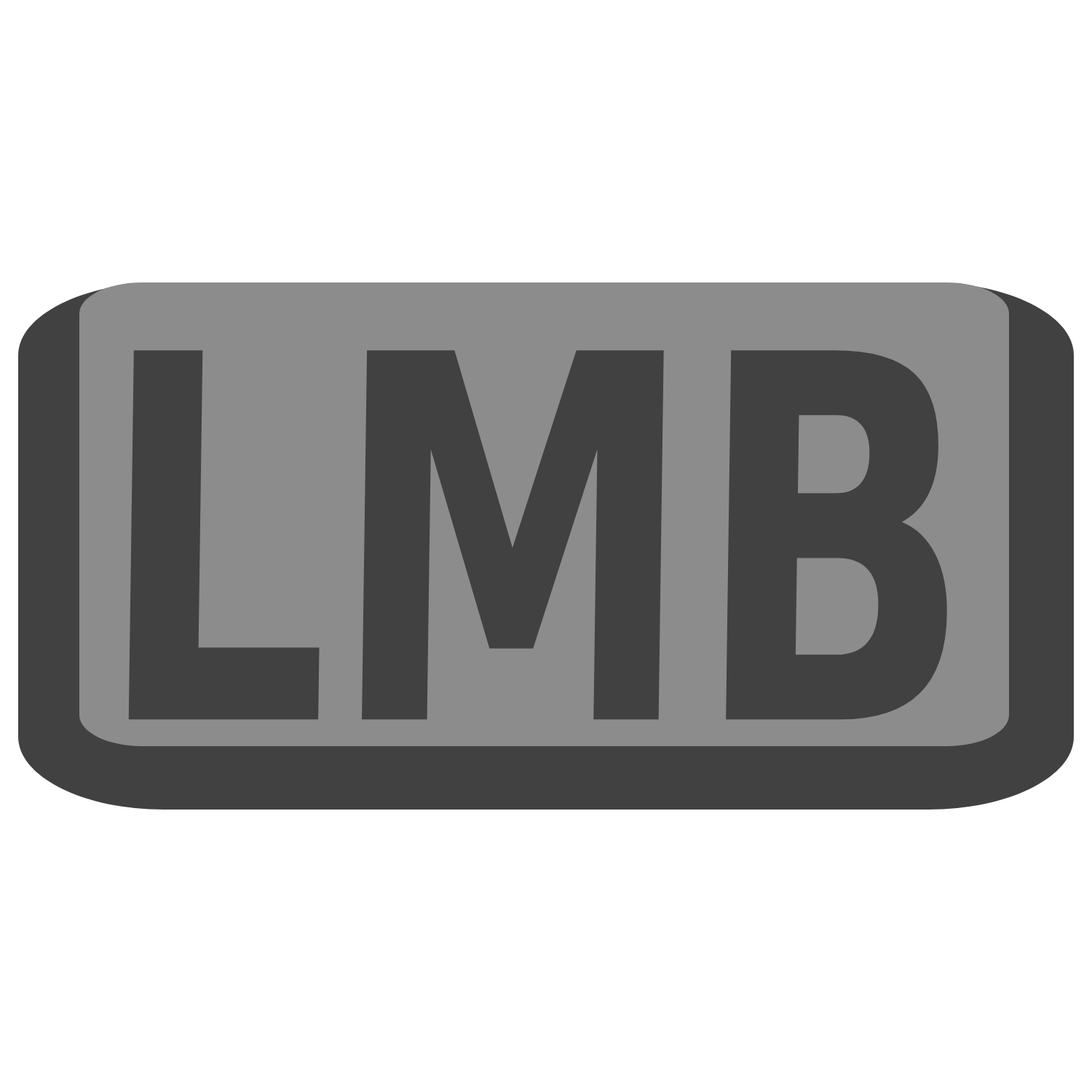
<style>
.page{position:relative;width:1092px;height:1092px;background:#ffffff}
.page>*{position:absolute;margin:0}
.t1{font:509.9px "GillSansMT-Bold";color:#414141;font-style:italic;scale:0.72 1}
</style>
<div class="page">
<p class="t1" style="left:128px;top:350px;width:820px;height:370px">LMB</p>
</div>
